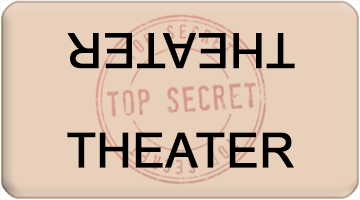
<style>
.page{position:relative;width:360px;height:200px;background:#e8d0bb}
.page>*{position:absolute;margin:0}
.t1{font:48px "ArialMT";color:#000000;font-weight:bold}
</style>
<div class="page">
<p class="t1" style="left:67px;top:33px;width:228px;height:36px;rotate:180deg">THEATER</p>
<p class="t1" style="left:67px;top:132px;width:227px;height:36px">THEATER</p>
</div>
